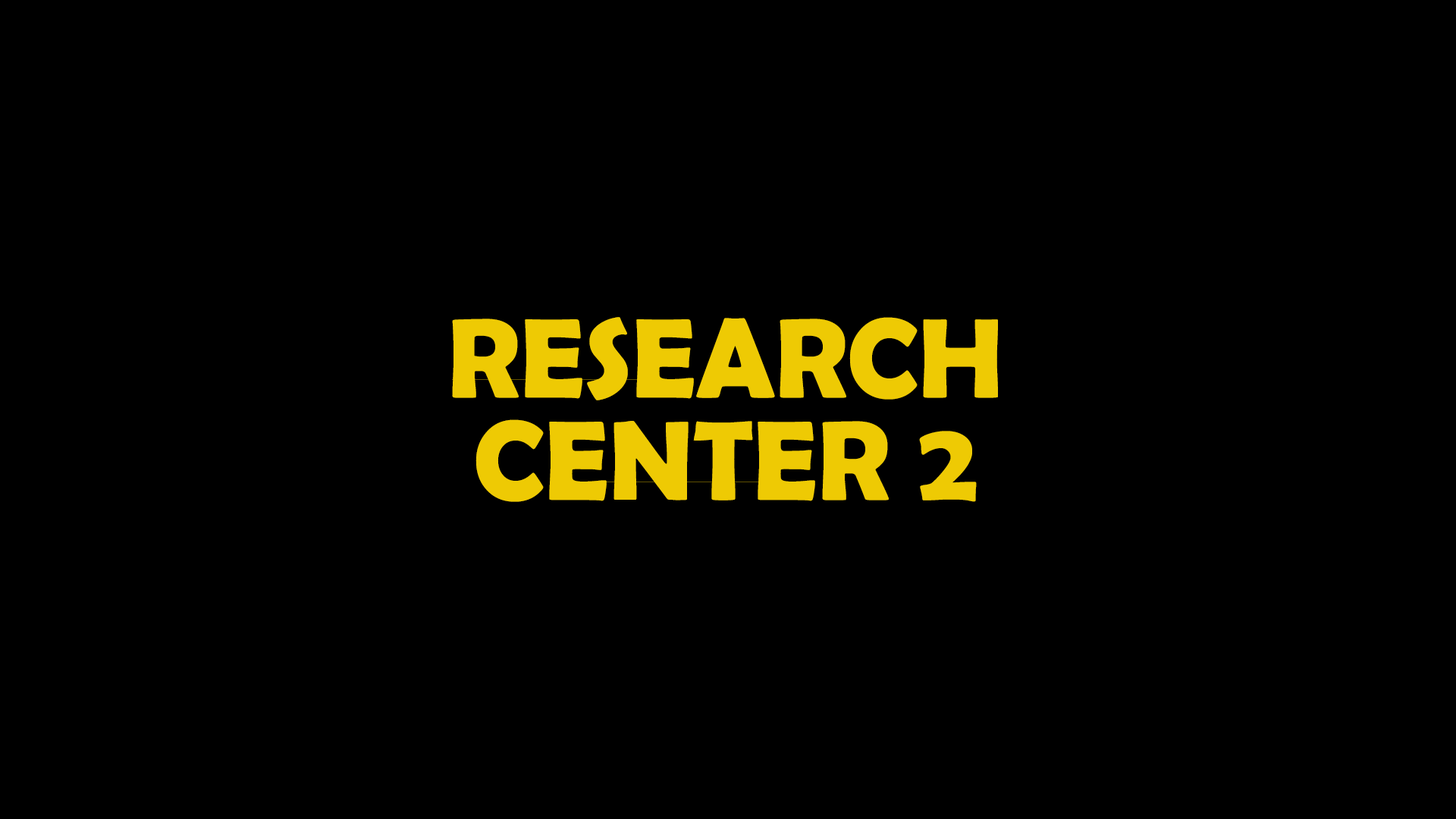
<style>
.page{position:relative;width:1456px;height:819px;background:#000000}
.page>*{position:absolute;margin:0}
.t1{font:113.7px/102.4px "BerlinSansFBDemi-Bold";color:#eeca04}
</style>
<div class="page">
<p class="t1" style="left:452px;top:317px;width:546px;height:185px;text-align:center">RESEARCH<br>CENTER 2</p>
</div>
